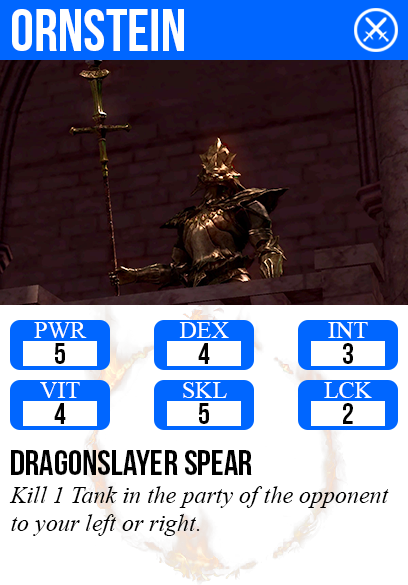
<style>
.page{position:relative;width:408px;height:585px;background:#ffffff}
.page>*{position:absolute;margin:0}
.t1{font:60px "BebasNeue";color:#ffffff}
.t2{font:24px "TimesNewRomanPSMT";color:#ffffff}
.t3{font:30px "BebasNeue";color:#000000}
.t4{font:36px "BebasNeue";color:#000000}
.t5{font:24px "TimesNewRomanPS-ItalicMT";color:#000000}
</style>
<div class="page">
<p class="t1" style="left:12px;top:9px;width:172px;height:42px">ornstein</p>
<p class="t2" style="left:34px;top:322px;width:53px;height:16px">PWR</p>
<p class="t2" style="left:179px;top:322px;width:50px;height:16px">DEX</p>
<p class="t2" style="left:328px;top:322px;width:40px;height:17px">INT</p>
<p class="t3" style="left:55px;top:343px;width:10px;height:21px">5</p>
<p class="t3" style="left:198px;top:343px;width:12px;height:21px">4</p>
<p class="t3" style="left:343px;top:343px;width:10px;height:21px">3</p>
<p class="t2" style="left:40px;top:382px;width:40px;height:16px">VIT</p>
<p class="t2" style="left:183px;top:382px;width:44px;height:16px">SKL</p>
<p class="t2" style="left:324px;top:382px;width:48px;height:16px">LCK</p>
<p class="t3" style="left:54px;top:403px;width:12px;height:21px">4</p>
<p class="t3" style="left:199px;top:403px;width:10px;height:21px">5</p>
<p class="t3" style="left:343px;top:403px;width:10px;height:21px">2</p>
<p class="t4" style="left:11px;top:450px;width:241px;height:25px">dragonslayer spear</p>
<p class="t5" style="left:9px;top:486px;width:380px;height:50px">Kill 1 Tank in the party of the opponent<br>to your left or right.</p>
</div>
